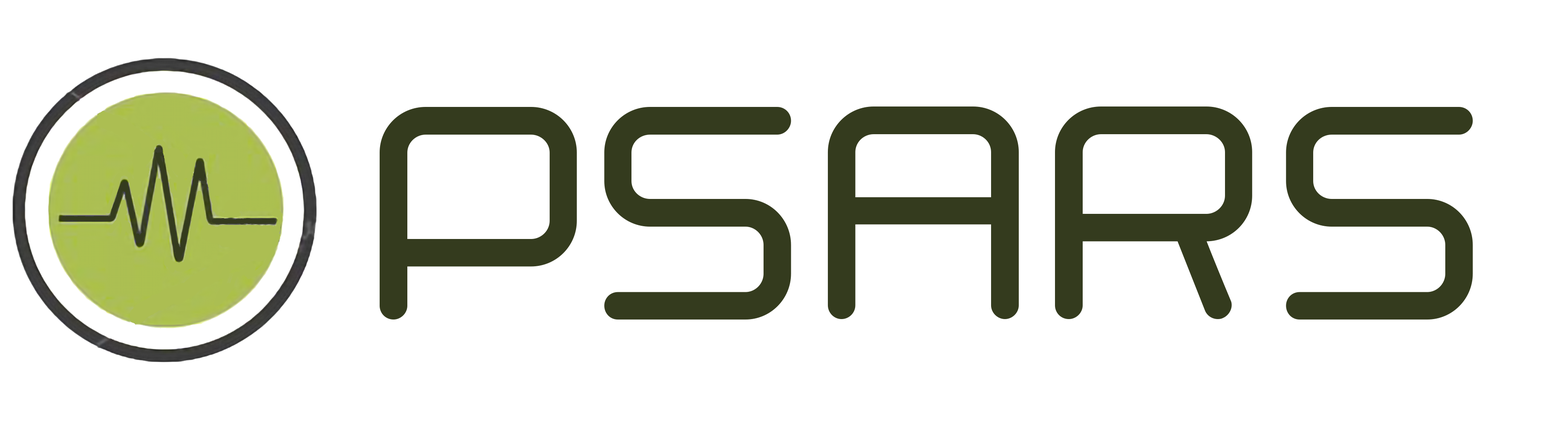
<style>
.page{position:relative;width:1568px;height:426px;background:#ffffff}
.page>*{position:absolute;margin:0}
.t1{font:266.3px "Neogrey-Medium";color:#343b1e}
</style>
<div class="page">
<p class="t1" style="left:380px;top:107px;width:1093px;height:213px">PSARS</p>
</div>
